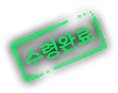
<style>
.page{position:relative;width:118px;height:93px;background:#ffffff}
.page>*{position:absolute;margin:0}
.t1{font:20.3px "SDKukdetopokki-aLt";color:#05ea5a}
</style>
<div class="page">
<p class="t1" style="left:26px;top:27px;width:69px;height:39px;rotate:-22deg">수령완료</p>
</div>
